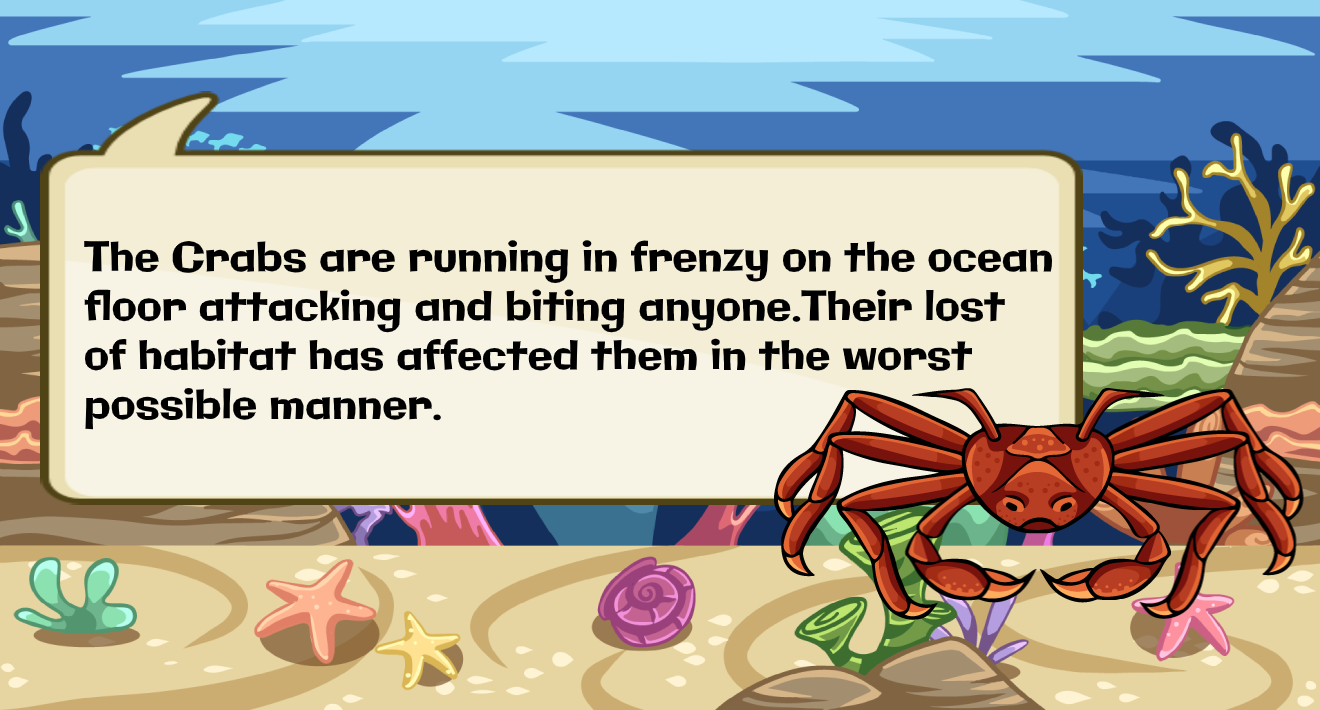
<style>
.page{position:relative;width:1320px;height:710px}
.page>*{position:absolute;margin:0}
.t1{font:41px "Galindo-Regular";color:#000000}
</style>
<div class="page">
<p class="t1" style="left:84px;top:240px;width:968px;height:190px">The Crabs are running in frenzy on the ocean <br>floor attacking and biting anyone.Their lost<br>of habitat has affected them in the worst <br>possible manner.</p>
</div>
